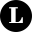
<style>
.page{position:relative;width:32px;height:32px;background:#000000}
.page>*{position:absolute;margin:0}
.t1{font:24px "BodoniMT-Bold";letter-spacing:0.02em;color:#ffffff}
</style>
<div class="page">
<p class="t1" style="left:9px;top:7px;width:14px;height:16px">L</p>
</div>
